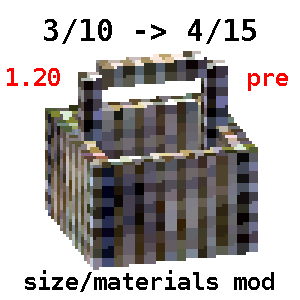
<style>
.page{position:relative;width:300px;height:300px;background:#ffffff}
.page>*{position:absolute;margin:0}
.t1{font:30px "DejaVuSansMono-Bold";color:#000000}
.t2{font:24px "DejaVuSansMono-Bold";color:#ff0000}
.t3{font:24px "DejaVuSansMono-Bold";color:#000000}
</style>
<div class="page">
<p class="t1" style="left:44px;top:19px;width:212px;height:25px">3/10 -&gt; 4/15</p>
<p class="t2" style="left:7px;top:68px;width:53px;height:18px">1.20</p>
<p class="t2" style="left:248px;top:73px;width:40px;height:18px">pre</p>
<p class="t3" style="left:25px;top:270px;width:249px;height:22px">size/materials mod</p>
</div>
